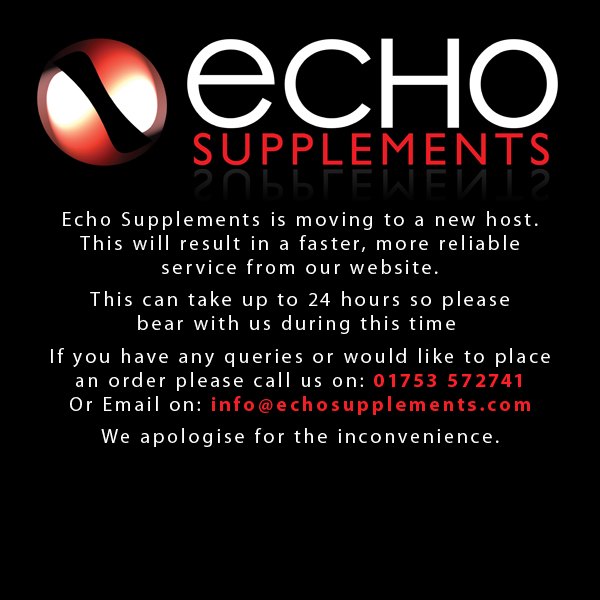
<style>
.page{position:relative;width:600px;height:600px;background:#000000}
.page>*{position:absolute;margin:0}
.t1{font:20px "MyriadPro-Regular";letter-spacing:0.15em;color:#ffffff}
.t2{font:20px "MyriadPro-Bold";letter-spacing:0.15em;color:#fc1f28}
.t3{font:20px "MyriadPro-Bold";letter-spacing:0.15em;color:#f21f26}
</style>
<div class="page">
<p class="t1" style="left:51px;top:211px;width:499px;height:236px;text-align:center">Echo Supplements is moving to a new host.<br>This will result in a faster, more reliable<br>service from our website.<br><br>This can take up to 24 hours so please<br>bear with us during this time <br><br>If you have any queries or would like to place<br>an order please call us on: <span class="t2">01753 572741<br></span>Or Email on: <span class="t3">info@echosupplements.com<br><br></span>We apologise for the inconvenience.</p>
</div>
